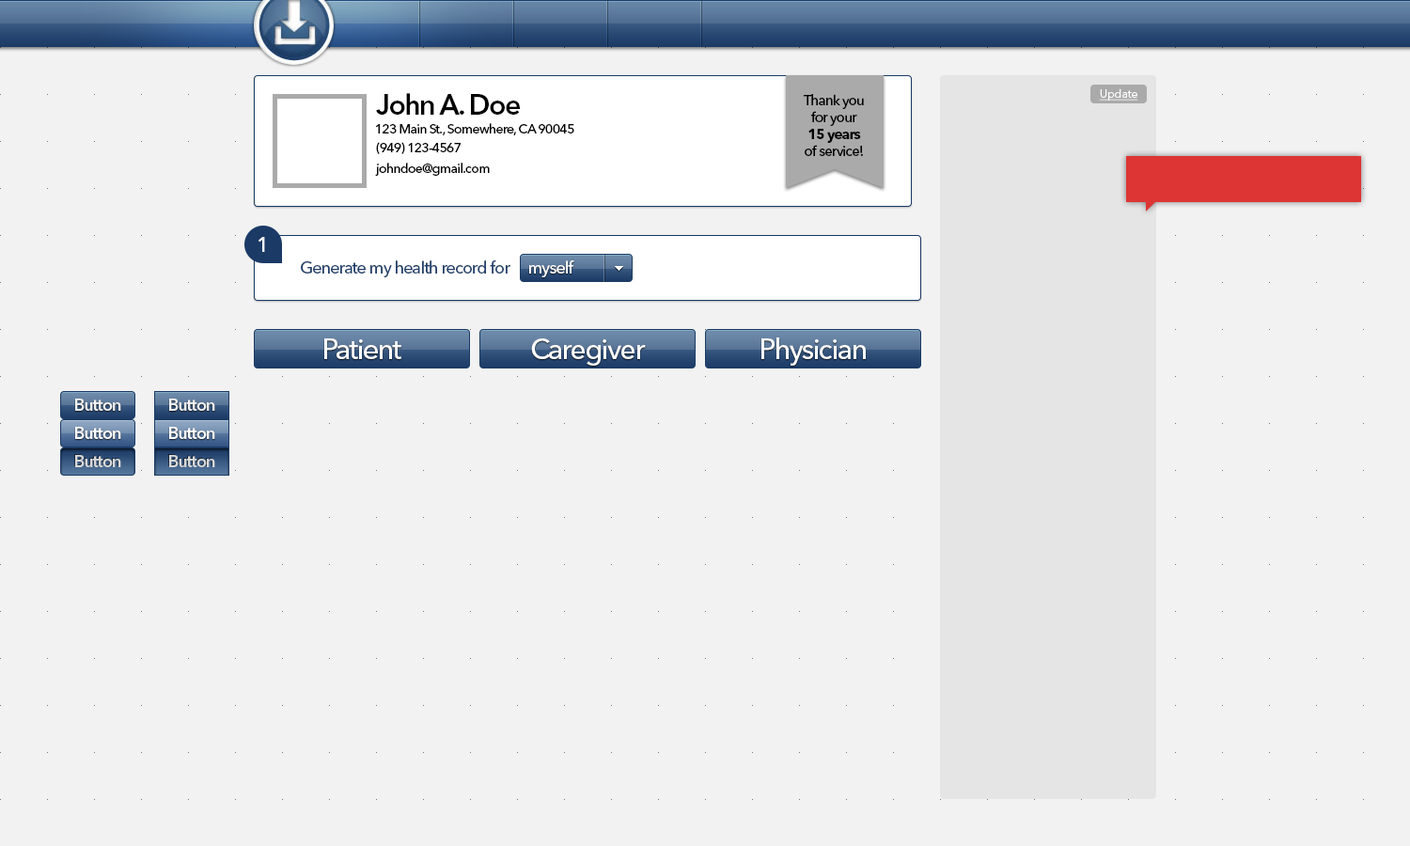
<style>
.page{position:relative;width:1410px;height:846px;background:#f2f2f2}
.page>*{position:absolute;margin:0}
.t1{font:11.3px "AvenirNextLTPro-Regular";color:#ffffff;text-decoration:underline}
.t2{font:28.2px "AvenirNextLTPro-Demi";letter-spacing:-0.05em;color:#000000}
.t3{font:14.1px "AvenirNextLTPro-Medium";letter-spacing:-0.05em;color:#000000}
.t4{font:14.1px "AvenirNextLTPro-Bold";letter-spacing:-0.05em;color:#000000}
.t5{font:13.2px "AvenirNextLTPro-Medium";letter-spacing:-0.05em;color:#000000}
.t6{font:20.7px "AvenirNextLTPro-Medium";letter-spacing:-0.05em;color:#ffffff}
.t7{font:16.9px "AvenirNextLTPro-Medium";letter-spacing:-0.05em;color:#203f6a}
.t8{font:16.9px "AvenirNextLTPro-Medium";letter-spacing:-0.05em;color:#ffffff}
.t9{font:28.2px "AvenirNextLTPro-Medium";letter-spacing:-0.05em;color:#ffffff}
.t10{font:16.9px "AvenirNextLTPro-Demi";letter-spacing:-0.05em;color:#f2f2f2}
.t11{font:16.9px "AvenirNextLTPro-Demi";letter-spacing:-0.05em;color:#ffffff}
.t12{font:16.9px "AvenirNextLTPro-Demi";letter-spacing:-0.05em;color:#d9d9d9}
</style>
<div class="page">
<p class="t1" style="left:1099px;top:88px;width:39px;height:13px">Update</p>
<p class="t2" style="left:376px;top:93px;width:144px;height:22px">John A. Doe</p>
<p class="t3" style="left:803px;top:94px;width:61px;height:62px;text-align:center">Thank you<br>for your<br><span class="t4">15 years<br></span>of service!</p>
<p class="t5" style="left:375px;top:123px;width:199px;height:12px">123 Main St., Somewhere, CA 90045</p>
<p class="t5" style="left:376px;top:142px;width:85px;height:12px">(949) 123-4567</p>
<p class="t5" style="left:375px;top:163px;width:115px;height:13px">johndoe@gmail.com</p>
<p class="t6" style="left:258px;top:237px;width:7px;height:15px">1</p>
<p class="t7" style="left:301px;top:260px;width:209px;height:17px">Generate my health record for</p>
<p class="t8" style="left:529px;top:260px;width:45px;height:17px">myself</p>
<p class="t9" style="left:324px;top:338px;width:77px;height:21px">Patient</p>
<p class="t9" style="left:531px;top:338px;width:115px;height:28px">Caregiver</p>
<p class="t9" style="left:761px;top:337px;width:105px;height:29px">Physician</p>
<p class="t10" style="left:75px;top:398px;width:46px;height:13px">Button</p>
<p class="t10" style="left:169px;top:398px;width:46px;height:13px">Button</p>
<p class="t11" style="left:75px;top:427px;width:46px;height:12px">Button</p>
<p class="t11" style="left:169px;top:427px;width:46px;height:12px">Button</p>
<p class="t12" style="left:75px;top:455px;width:46px;height:12px">Button</p>
<p class="t12" style="left:169px;top:455px;width:46px;height:12px">Button</p>
</div>
